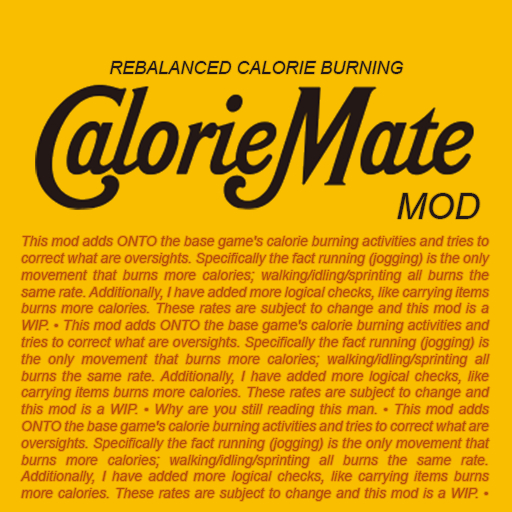
<style>
.page{position:relative;width:512px;height:512px;background:#fabe00}
.page>*{position:absolute;margin:0}
.t1{font:18px "Arial-ItalicMT";color:#231815}
.t2{font:36px "Arial-ItalicMT";color:#231815}
.t3{font:14px "Arial-ItalicMT";color:#b74f0c}
</style>
<div class="page">
<p class="t1" style="left:110px;top:61px;width:293px;height:13px">REBALANCED CALORIE BURNING</p>
<p class="t2" style="left:397px;top:193px;width:83px;height:26px">MOD</p>
<p class="t3" style="left:20px;top:236px;width:470px;height:265px;text-align:justify">This mod adds ONTO the base game's calorie burning activities and tries to correct what are oversights. Specifically the fact running (jogging) is the only movement that burns more calories; walking/idling/sprinting all burns the same rate. Additionally, I have added more logical checks, like carrying items burns more calories. These rates are subject to change and this mod is a WIP. • This mod adds ONTO the base game's calorie burning activities and tries to correct what are oversights. Specifically the fact running (jogging) is the only movement that burns more calories; walking/idling/sprinting all burns the same rate. Additionally, I have added more logical checks, like carrying items burns more calories. These rates are subject to change and this mod is a WIP. • Why are you still reading this man. • This mod adds ONTO the base game's calorie burning activities and tries to correct what are oversights. Specifically the fact running (jogging) is the only movement that burns more calories; walking/idling/sprinting all burns the same rate. Additionally, I have added more logical checks, like carrying items burns more calories. These rates are subject to change and this mod is a WIP. •</p>
</div>
